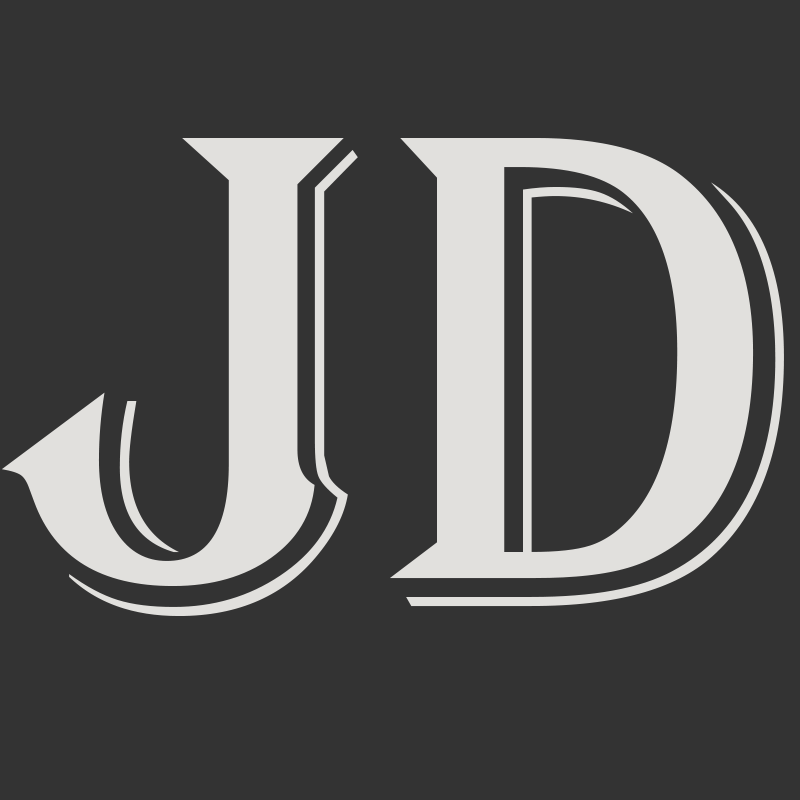
<style>
.page{position:relative;width:800px;height:800px;background:#333333}
.page>*{position:absolute;margin:0}
.t1{font:701.6px "Algerian";color:#e1e0dd}
</style>
<div class="page">
<p class="t1" style="left:1px;top:138px;width:783px;height:478px">JD</p>
</div>
